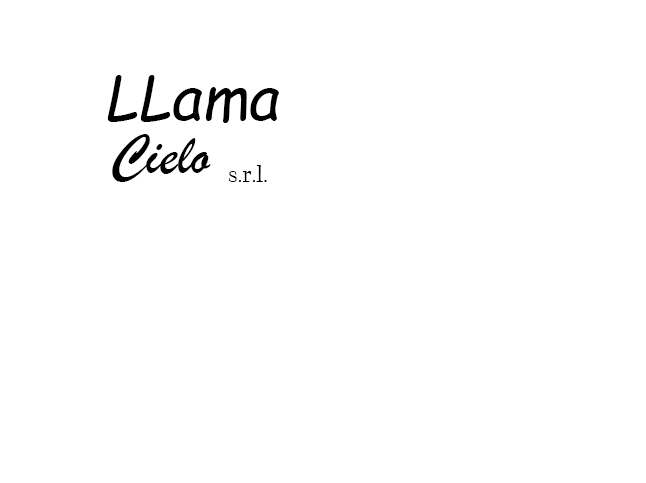
<style>
.page{position:relative;width:646px;height:483px;background:#ffffff}
.page>*{position:absolute;margin:0}
.t1{font:60px "ComicSansMS-Italic";color:#000000}
.t2{font:60px "BrushScriptMT";color:#000000}
.t3{font:24px "CalifornianFB-Reg";color:#000000}
</style>
<div class="page">
<p class="t1" style="left:107px;top:75px;width:172px;height:48px">LLama</p>
<p class="t2" style="left:112px;top:134px;width:99px;height:48px">Cielo</p>
<p class="t3" style="left:228px;top:165px;width:39px;height:17px">s.r.l.</p>
</div>
